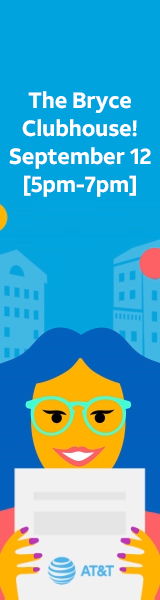
<style>
.page{position:relative;width:160px;height:600px;background:#00a3dd}
.page>*{position:absolute;margin:0}
.t1{font:22.2px/28.1px "ATTAleckSans_Bold";letter-spacing:-0.014em;color:#ffffff}
</style>
<div class="page">
<p class="t1" style="left:9px;top:91px;width:142px;height:106px;text-align:center">The Bryce Clubhouse!<br>September 12 <br>[5pm-7pm]</p>
</div>
